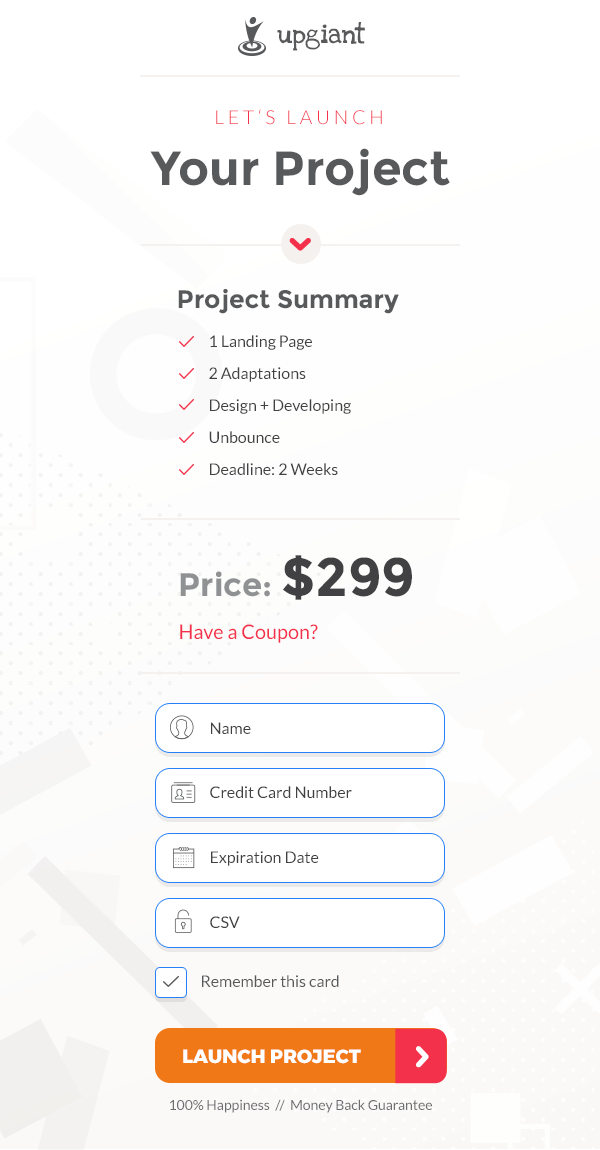
<style>
.page{position:relative;width:600px;height:1150px;background:#ffffff}
.page>*{position:absolute;margin:0}
.t1{font:19.2px "LoveYaLikeASisterSolid";color:#58595b}
.t2{font:19.2px "Lato-Light";color:#f4314a;text-transform:uppercase}
.t3{font:48px "Montserrat-Bold";color:#58595b}
.t4{font:25.2px "Montserrat-Bold";color:#58595b}
.t5{font:16px/32px "Lato-Regular";color:#414042}
.t6{font:32.4px "Montserrat-Bold";color:#909193}
.t7{font:54px "Montserrat-Bold";color:#414042}
.t8{font:20px "Lato-Regular";color:#f4314a}
.t9{font:16px "Lato-Regular";color:#414042}
.t10{font:16px "Lato-Regular";color:#58595b}
.t11{font:19.2px "Montserrat-ExtraBold";color:#ffffff}
.t12{font:14px "Lato-Regular";color:#6d6e71}
</style>
<div class="page">
<p class="t1" style="left:277px;top:22px;width:88px;height:29px">upgiant</p>
<p class="t2" style="left:216px;top:109px;width:166px;height:16px">L E T ‘ S   L A U N C H</p>
<p class="t3" style="left:150px;top:148px;width:300px;height:48px">Your Project</p>
<p class="t4" style="left:178px;top:289px;width:221px;height:25px">Project Summary</p>
<p class="t5" style="left:209px;top:335px;width:142px;height:140px">1 Landing Page<br>2 Adaptations<br>Design + Developing<br>Unbounce<br>Deadline: 2 Weeks</p>
<p class="t6" style="left:180px;top:555px;width:232px;height:45px">Price: <span class="t7">$299</span></p>
<p class="t8" style="left:180px;top:624px;width:138px;height:19px">Have a Coupon?</p>
<p class="t9" style="left:211px;top:722px;width:40px;height:12px">Name</p>
<p class="t9" style="left:210px;top:786px;width:142px;height:13px">Credit Card Number</p>
<p class="t9" style="left:211px;top:851px;width:108px;height:15px">Expiration Date</p>
<p class="t9" style="left:210px;top:916px;width:30px;height:12px">CSV</p>
<p class="t10" style="left:202px;top:975px;width:137px;height:13px">Remember this card</p>
<p class="t11" style="left:183px;top:1049px;width:178px;height:15px">LAUNCH PROJECT</p>
<p class="t12" style="left:170px;top:1099px;width:262px;height:14px">100% Happiness  //  Money Back Guarantee</p>
</div>
